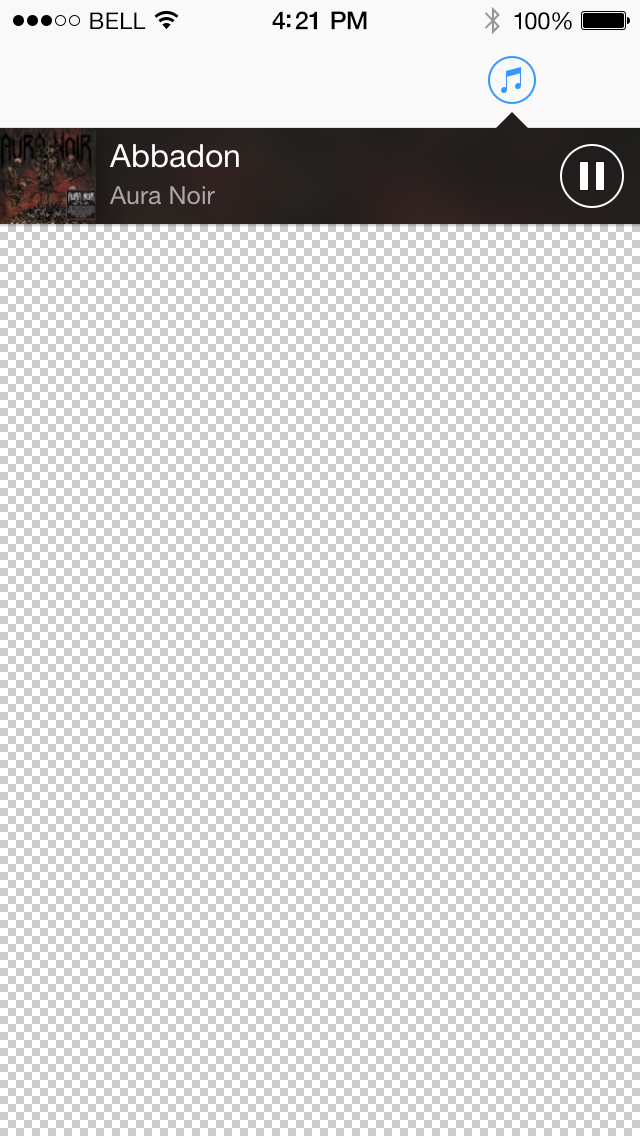
<style>
.page{position:relative;width:640px;height:1136px;background:#ffffff}
.page>*{position:absolute;margin:0}
.t1{font:23px "HelveticaNeue";letter-spacing:0.02em;color:#000000}
.t2{font:25px "HelveticaNeue-Medium";letter-spacing:-0.02em;color:#000000}
.t3{font:24px "HelveticaNeue";letter-spacing:-0.02em;color:#000000}
.t4{font:32px "HelveticaNeue";color:#ffffff}
.t5{font:24.9px "HelveticaNeue";color:#aaa7a5}
</style>
<div class="page">
<p class="t1" style="left:90px;top:12px;width:56px;height:17px">BELL</p>
<p class="t2" style="left:272px;top:11px;width:95px;height:19px">4:21 PM</p>
<p class="t3" style="left:514px;top:12px;width:58px;height:18px">100%</p>
<p class="t4" style="left:109px;top:144px;width:130px;height:24px">Abbadon</p>
<p class="t5" style="left:110px;top:186px;width:105px;height:19px">Aura Noir</p>
</div>
